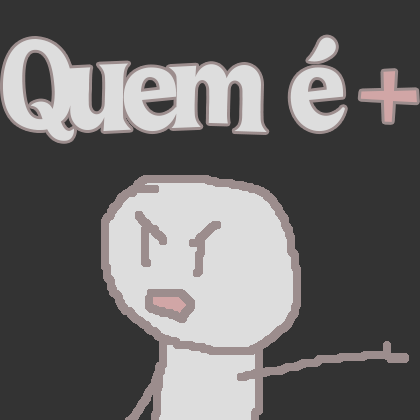
<style>
.page{position:relative;width:420px;height:420px;background:#333333}
.page>*{position:absolute;margin:0}
.t1{font:127.2px "LTFunk-Bold";letter-spacing:-0.08em;color:#dddddd}
.t2{font:127.2px "LTFunk-Bold";letter-spacing:-0.08em;color:#d1a6a6}
</style>
<div class="page">
<p class="t1" style="left:3px;top:37px;width:414px;height:104px">Quem   é  <span class="t2">+</span></p>
</div>
